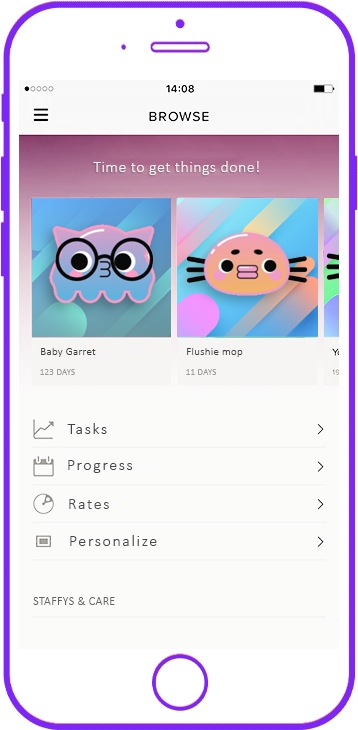
<style>
.page{position:relative;width:358px;height:730px;background:#fbfbfa}
.page>*{position:absolute;margin:0}
.t1{font:16px "Calibri-Light";letter-spacing:0.026em;color:#f2f2f2}
.t2{font:11px "Calibri-Light";letter-spacing:0.026em;color:#3f3f3f}
.t3{font:11px "Calibri-Light";letter-spacing:0.026em;color:#424242}
.t4{font:9px "Calibri-Light";letter-spacing:0.026em;color:#9c9c9c}
.t5{font:16px "Calibri-Light";letter-spacing:0.1em;color:#424242}
.t6{font:16px "Calibri-Light";letter-spacing:0.1em;color:#464747}
.t7{font:16px "Calibri-Light";letter-spacing:0.1em;color:#494a4a}
.t8{font:16px "Calibri-Light";letter-spacing:0.1em;color:#464746}
.t9{font:12px "Calibri-Light";letter-spacing:0.026em;color:#626463}
</style>
<div class="page">
<p class="t1" style="left:93px;top:161px;width:166px;height:14px">Time to get things done!</p>
<p class="t2" style="left:41px;top:348px;width:55px;height:9px">Baby Garret</p>
<p class="t3" style="left:187px;top:348px;width:56px;height:9px">Flushie mop</p>
<p class="t4" style="left:40px;top:369px;width:35px;height:6px">123 DAYS</p>
<p class="t4" style="left:186px;top:369px;width:31px;height:6px">11 DAYS</p>
<p class="t5" style="left:67px;top:423px;width:40px;height:11px">Tasks</p>
<p class="t6" style="left:68px;top:460px;width:65px;height:13px">Progress</p>
<p class="t7" style="left:69px;top:499px;width:40px;height:10px">Rates</p>
<p class="t8" style="left:70px;top:535px;width:87px;height:11px">Personalize</p>
<p class="t9" style="left:33px;top:597px;width:82px;height:8px">STAFFYS &amp; CARE</p>
</div>
